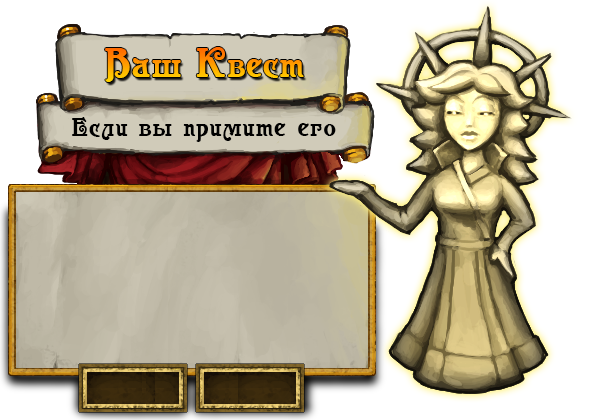
<style>
.page{position:relative;width:600px;height:420px;background:#ffffff}
.page>*{position:absolute;margin:0}
.t1{font:36px "Casanova";letter-spacing:0.03em}
.t2{font:42px "Casanova";letter-spacing:0.03em}
.t3{font:26px "Casanova";letter-spacing:0.04em;color:#000000}
</style>
<div class="page">
<p class="t1" style="left:105px;top:47px;width:199px;height:35px"><span class="t2">В</span>аш <span class="t2">К</span>вест</p>
<p class="t3" style="left:72px;top:117px;width:264px;height:25px">Если вы примите его</p>
</div>
